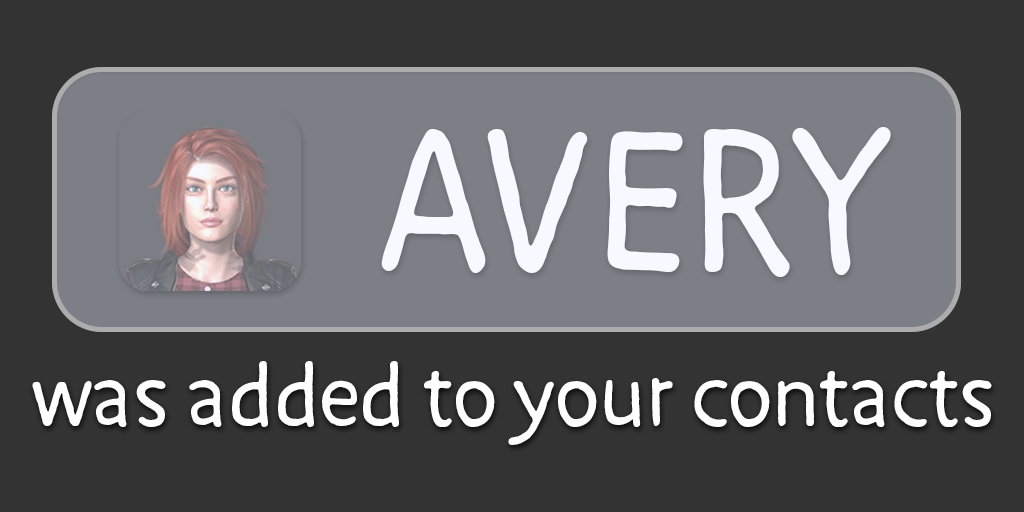
<style>
.page{position:relative;width:1024px;height:512px;background:#333333}
.page>*{position:absolute;margin:0}
.t1{font:228.9px "DuperPro";color:#f6f9ff}
.t2{font:95.1px "DuperPro";color:#ffffff}
</style>
<div class="page">
<p class="t1" style="left:381px;top:127px;width:510px;height:150px">AVERY</p>
<p class="t2" style="left:32px;top:361px;width:960px;height:84px">was added to your contacts</p>
</div>
